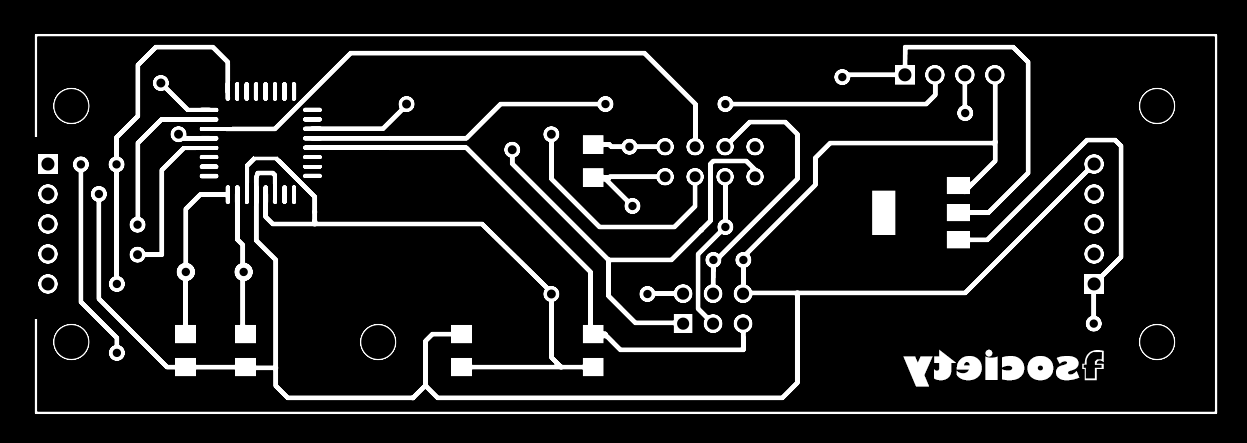
<style>
.page{position:relative;width:1247px;height:443px;background:#000000}
.page>*{position:absolute;margin:0}
.t1{font:40px "GillSans-UltraBold";color:#ffffff}
</style>
<div class="page">
<p class="t1" style="left:903px;top:349px;width:177px;height:38px;rotate:180deg">society</p>
</div>
